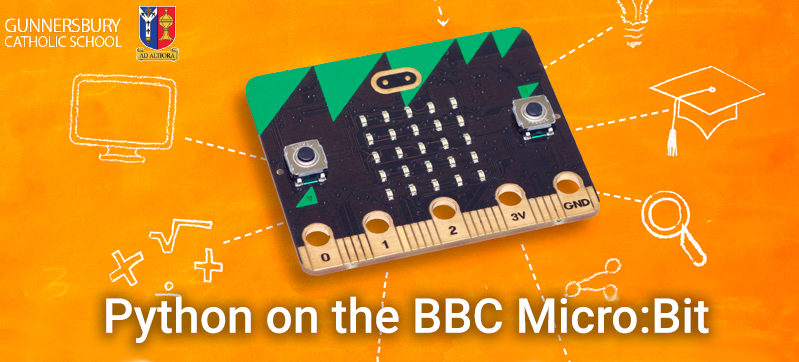
<style>
.page{position:relative;width:799px;height:362px}
.page>*{position:absolute;margin:0}
.t1{font:48px "Roboto-Medium";color:#ffffff}
</style>
<div class="page">
<p class="t1" style="left:106px;top:296px;width:603px;height:47px">Python on the BBC Micro:Bit</p>
</div>
